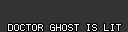
<style>
.page{position:relative;width:128px;height:32px;background:#333333}
.page>*{position:absolute;margin:0}
.t1{font:8px "Terminal";color:#ffffff}
</style>
<div class="page">
<p class="t1" style="left:8px;top:24px;width:113px;height:7px">DOCTOR GHOST IS LIT</p>
</div>
